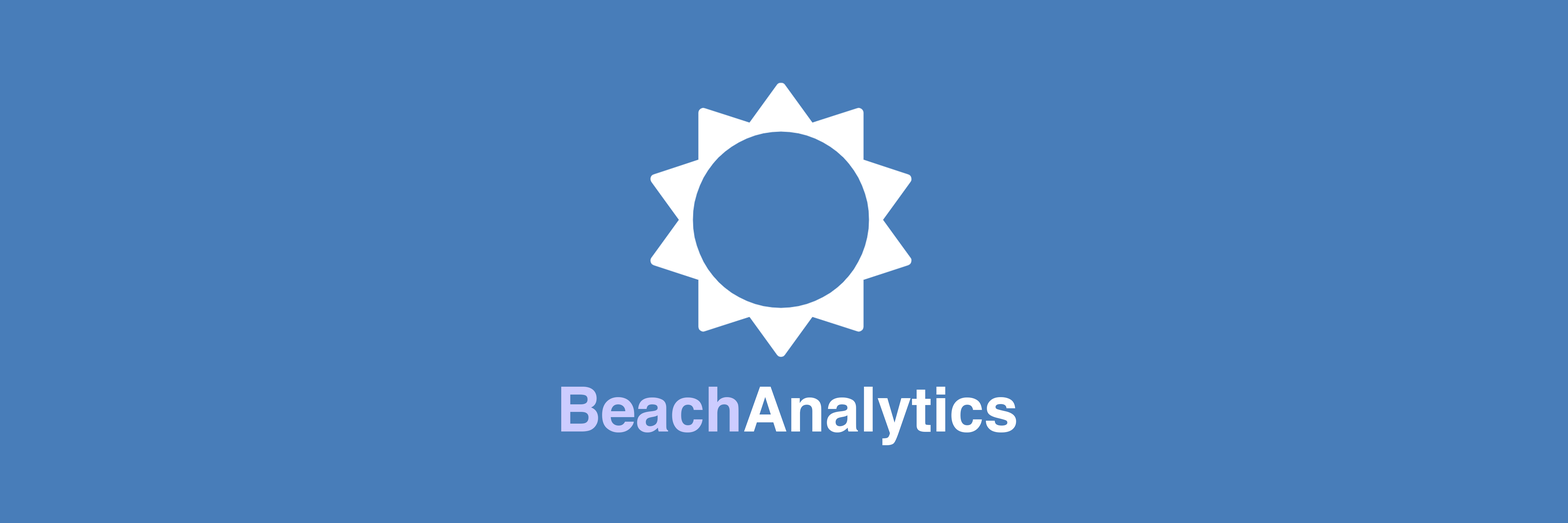
<style>
.page{position:relative;width:1568px;height:523px;background:#487db9}
.page>*{position:absolute;margin:0}
.t1{font:62.1px "Helvetica-Bold";color:#ffffff}
.t2{font:62.1px "Helvetica-Bold";color:#ccccff}
</style>
<div class="page">
<p class="t1" style="left:561px;top:386px;width:455px;height:59px"><span class="t2">Beach</span>Analytics</p>
</div>
